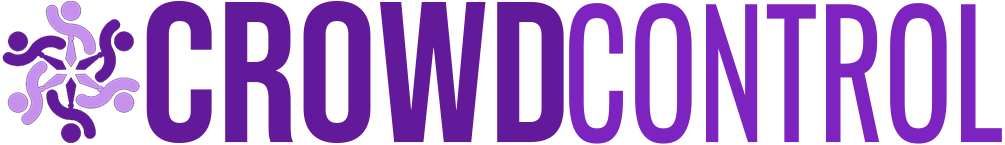
<style>
.page{position:relative;width:1005px;height:145px;background:#ffffff}
.page>*{position:absolute;margin:0}
.t1{font:200px "BebasNeue-Regular";color:#62199a}
.t2{font:170px "Oswald-Regular";color:#7c23c0;scale:0.75 1}
</style>
<div class="page">
<p class="t1" style="left:146px;top:1px;width:418px;height:142px">Crowd</p>
<p class="t2" style="left:569px;top:3px;width:433px;height:141px">CONTROL</p>
</div>
